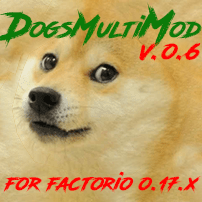
<style>
.page{position:relative;width:202px;height:202px}
.page>*{position:absolute;margin:0}
.t1{font:23px "RoadRage";color:#ff0101}
.t2{font:19px "RoadRage";color:#ff0101}
</style>
<div class="page">
<p class="t1" style="left:139px;top:42px;width:62px;height:19px">v.o.6</p>
<p class="t2" style="left:3px;top:171px;width:198px;height:23px">for factorio o.17.x</p>
</div>
